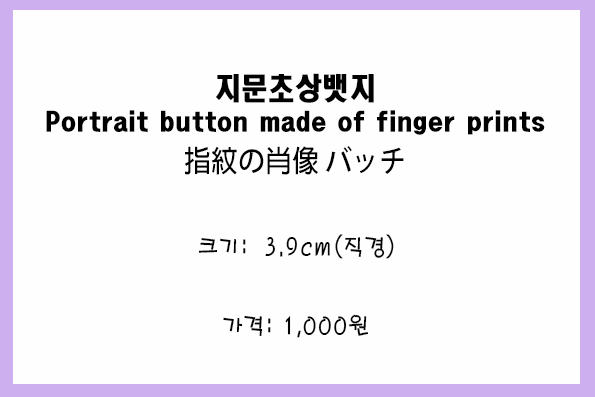
<style>
.page{position:relative;width:595px;height:397px;background:#fffefe}
.page>*{position:absolute;margin:0}
.t1{font:24px/36px "HeadlineR-HM";color:#010101;scale:0.9 1}
.t2{font:30px/36px "HeadlineR-HM";color:#010101;scale:0.9 1}
.t3{font:30px/36px "AdobeFanHeitiStd-Bold";color:#010101;scale:0.9 1}
.t4{font:24px "H2porM";color:#040404;scale:0.9 1}
</style>
<div class="page">
<p class="t1" style="left:46px;top:73px;width:499px;height:102px;text-align:center"><span class="t2">지문초상뱃지<br></span>Portrait button made of finger prints<br><span class="t3">指紋の肖像 バッチ</span></p>
<p class="t4" style="left:198px;top:234px;width:196px;height:25px">크기:  3.9cm(직경)</p>
<p class="t4" style="left:223px;top:314px;width:146px;height:24px">가격: 1,000원</p>
</div>
